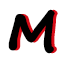
<style>
.page{position:relative;width:64px;height:64px;background:#ffffff}
.page>*{position:absolute;margin:0}
.t1{font:50.7px "SegoeScript-Bold";color:#000000;font-weight:bold}
.t2{font:50.7px "SegoeScript-Bold";font-weight:bold}
</style>
<div class="page">
<p class="t1" style="left:8px;top:9px;width:47px;height:45px">M</p>
<p class="t2" style="left:11px;top:9px;width:47px;height:45px">M</p>
</div>
